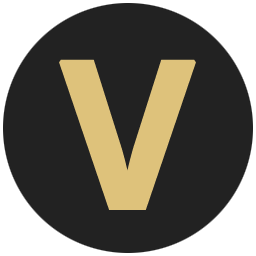
<style>
.page{position:relative;width:256px;height:256px;background:#222222}
.page>*{position:absolute;margin:0}
.t1{font:204.8px "OpenSans-Bold";letter-spacing:-0.005em;color:#dec27b;font-weight:bold}
</style>
<div class="page">
<p class="t1" style="left:59px;top:59px;width:137px;height:151px">V</p>
</div>
